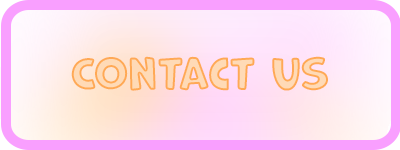
<style>
.page{position:relative;width:400px;height:150px}
.page>*{position:absolute;margin:0}
.t1{font:42.1px "MarvinRound"}
</style>
<div class="page">
<p class="t1" style="left:71px;top:56px;width:257px;height:35px">COntact us</p>
</div>
